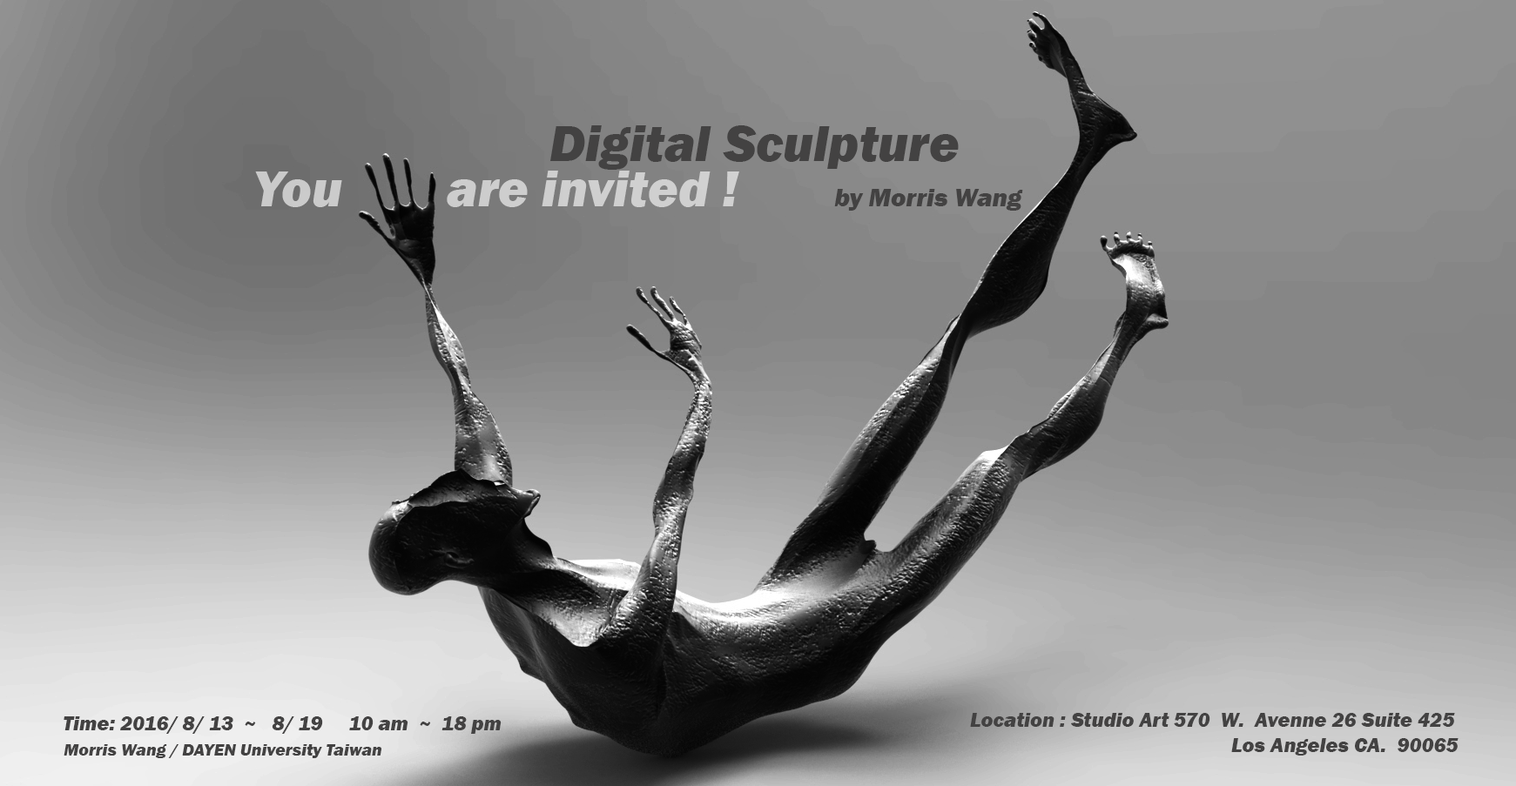
<style>
.page{position:relative;width:1516px;height:786px}
.page>*{position:absolute;margin:0}
.t1{font:52.3px "FranklinGothic-HeavyItalic";color:#434242}
.t2{font:52.3px "FranklinGothic-HeavyItalic";color:#cecece}
.t3{font:26.1px "FranklinGothic-HeavyItalic";color:#434242}
.t4{font:20.9px "FranklinGothic-HeavyItalic";color:#434242}
.t5{font:17.4px "FranklinGothic-HeavyItalic";color:#434242}
</style>
<div class="page">
<p class="t1" style="left:550px;top:125px;width:409px;height:45px">Digital Sculpture</p>
<p class="t2" style="left:255px;top:171px;width:484px;height:36px">You        are invited !</p>
<p class="t3" style="left:834px;top:189px;width:189px;height:22px">by Morris Wang</p>
<p class="t4" style="left:970px;top:713px;width:489px;height:43px">Location : Studio Art 570  W.  Avenne 26 Suite 425<br>                                                  Los Angeles CA.  90065</p>
<p class="t4" style="left:64px;top:717px;width:438px;height:17px">Time: 2016/ 8/ 13  ~   8/ 19     10 am  ~  18 pm</p>
<p class="t5" style="left:64px;top:745px;width:318px;height:14px">Morris Wang / DAYEN University Taiwan</p>
</div>
